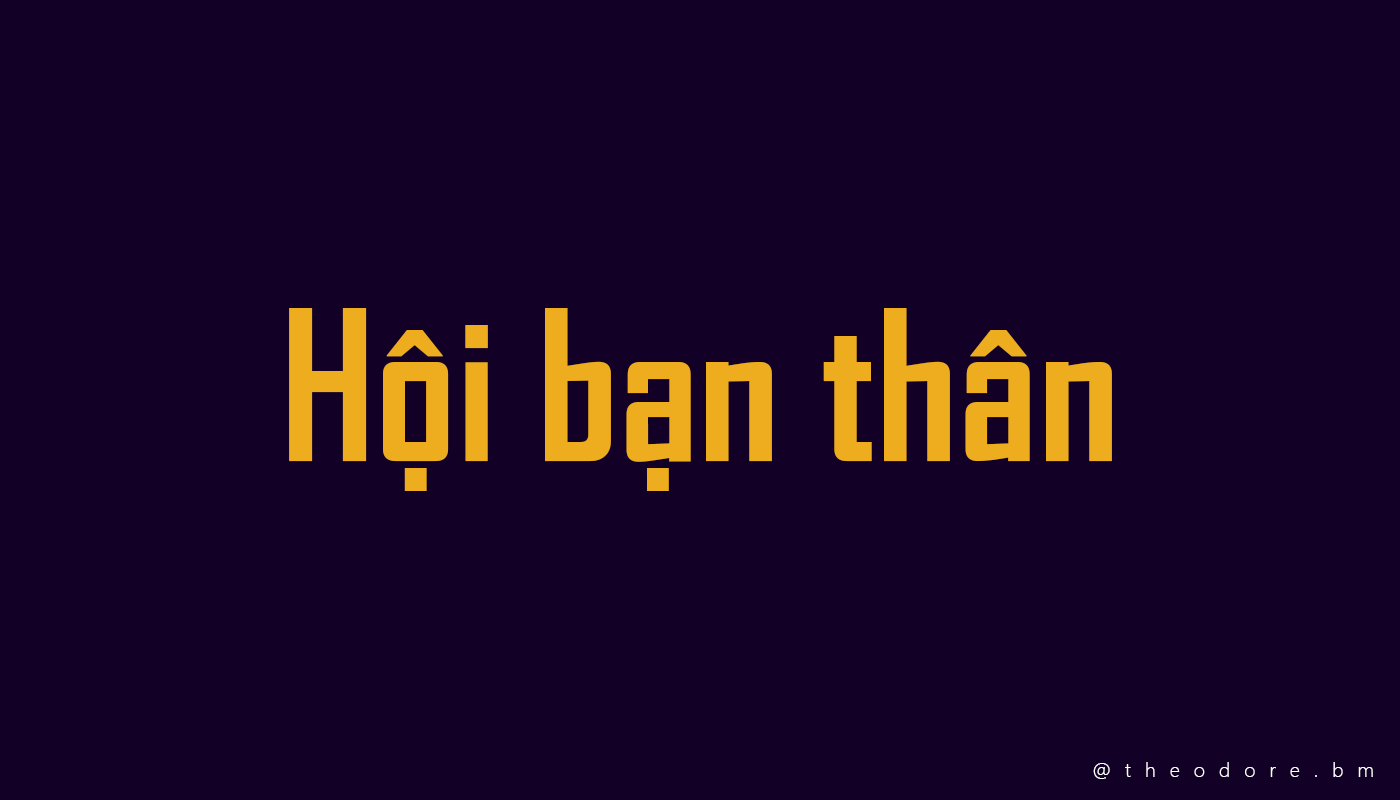
<style>
.page{position:relative;width:1400px;height:800px;background:#120026}
.page>*{position:absolute;margin:0}
.t1{font:200px "SVN-AgencyFBbold";color:#eead1f}
.t2{font:20px "SegoeUI-Light";letter-spacing:0.7em;color:#ffffff}
</style>
<div class="page">
<p class="t1" style="left:289px;top:308px;width:823px;height:183px">Hội bạn thân</p>
<p class="t2" style="left:1093px;top:762px;width:280px;height:17px">@theodore.bm</p>
</div>
